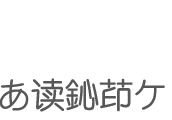
<style>
.page{position:relative;width:172px;height:120px;background:#ffffff}
.page>*{position:absolute;margin:0}
.t1{font:34px "STYuanti-TC-Regular";color:#575757}
</style>
<div class="page">
<p class="t1" style="left:0px;top:78px;width:165px;height:34px">あ读鈊茚ケ</p>
</div>
